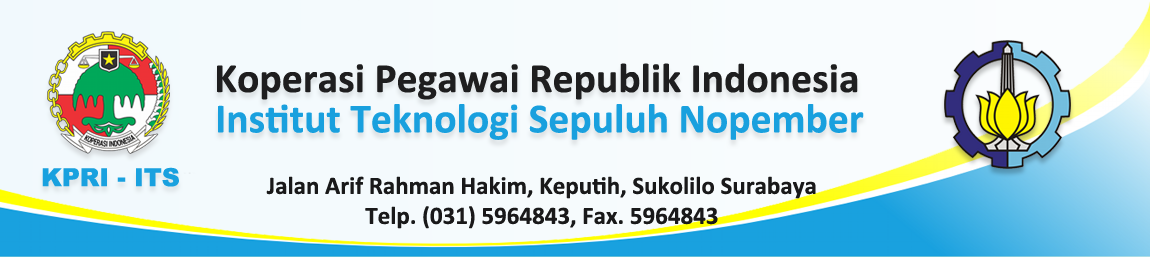
<style>
.page{position:relative;width:1150px;height:257px}
.page>*{position:absolute;margin:0}
.t1{font:41.7px "Calibri-Bold";color:#1f1f1f}
.t2{font:41.7px "Calibri-Bold";color:#19a1df}
.t3{font:25px "Arial-Black";color:#19a1df}
.t4{font:25px "Calibri-Bold";color:#1a1a1a}
</style>
<div class="page">
<p class="t1" style="left:217px;top:63px;width:641px;height:37px">Koperasi Pegawai Republik Indonesia</p>
<p class="t2" style="left:218px;top:104px;width:646px;height:36px">Institut Teknologi Sepuluh Nopember</p>
<p class="t3" style="left:42px;top:167px;width:137px;height:20px">KPRI - ITS</p>
<p class="t4" style="left:266px;top:176px;width:550px;height:53px;text-align:center">Jalan Arif Rahman Hakim, Keputih, Sukolilo Surabaya<br>Telp. (031) 5964843, Fax. 5964843</p>
</div>
